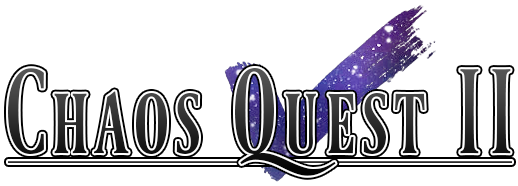
<style>
.page{position:relative;width:518px;height:186px;background:#ffffff}
.page>*{position:absolute;margin:0}
.t1{font:102px "Ferrum"}
</style>
<div class="page">
<p class="t1" style="left:8px;top:68px;width:503px;height:108px">Chaos Quest II</p>
</div>
